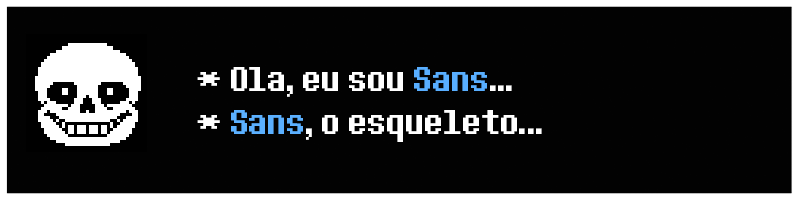
<style>
.page{position:relative;width:800px;height:200px;background:#020202}
.page>*{position:absolute;margin:0}
.t1{font:36px "DeterminationSans";color:#ffffff}
.t2{font:36px "DeterminationSans";color:#58aeff}
.t3{font:36px "DeterminationSans";color:#5bb0ff}
</style>
<div class="page">
<p class="t1" style="left:197px;top:67px;width:345px;height:75px">* Ola, eu sou <span class="t2">Sans</span>...<br>* <span class="t3">Sans</span>, o esqueleto...</p>
</div>
